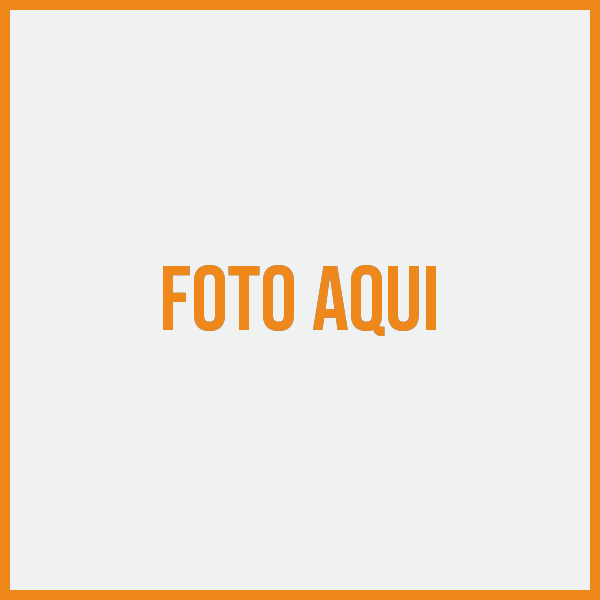
<style>
.page{position:relative;width:600px;height:600px;background:#eff2f1}
.page>*{position:absolute;margin:0}
.t1{font:92px "BebasNeue-Regular";color:#ee881b}
</style>
<div class="page">
<p class="t1" style="left:163px;top:265px;width:273px;height:71px">foto aqui</p>
</div>
